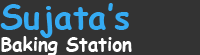
<style>
.page{position:relative;width:200px;height:55px;background:#333333}
.page>*{position:absolute;margin:0}
.t1{font:18.8px "ComicSansMS-Bold";color:#ffffff}
.t2{font:33.3px "ComicSansMS-Bold";color:#35abf3}
</style>
<div class="page">
<p class="t1" style="left:0px;top:3px;width:132px;height:53px"><span class="t2">Sujata’s<br></span>Baking Station</p>
</div>
